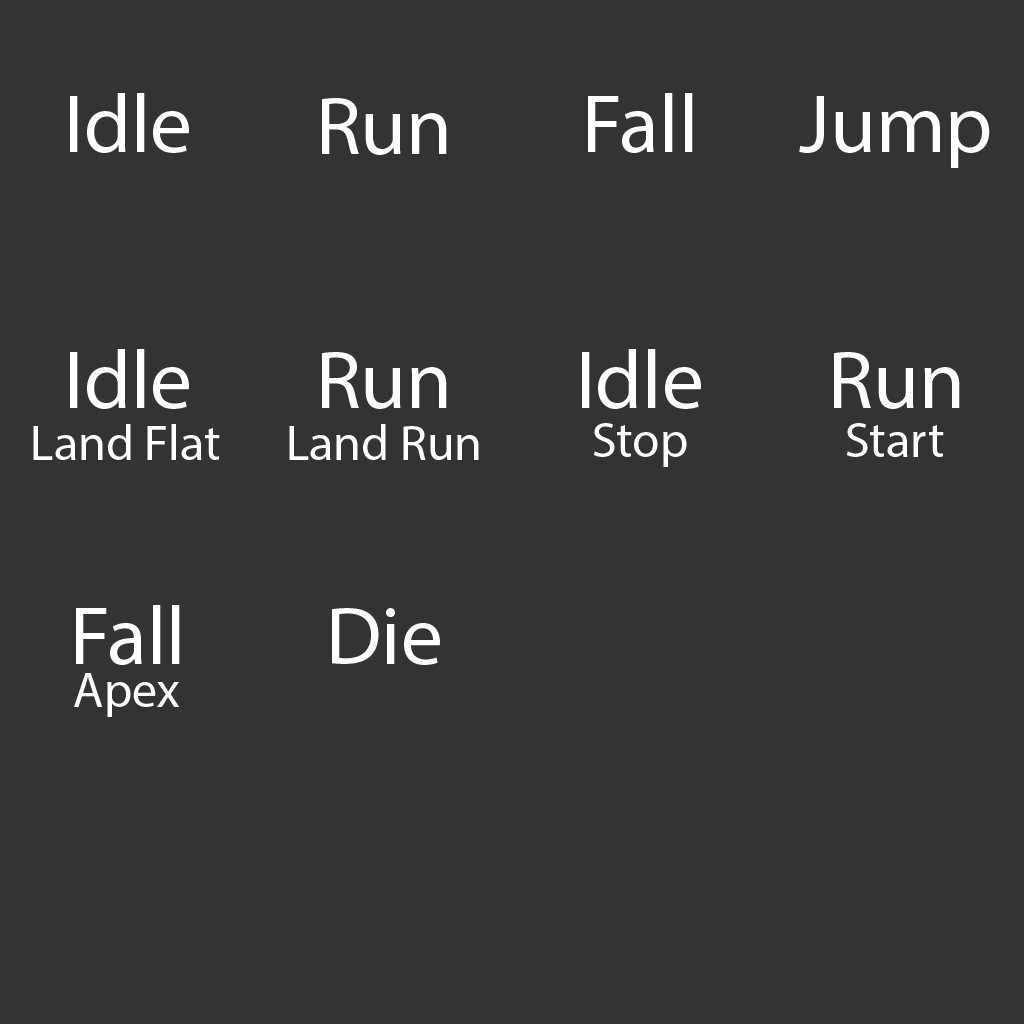
<style>
.page{position:relative;width:1024px;height:1024px;background:#333333}
.page>*{position:absolute;margin:0}
.t1{font:83.3px "MyriadPro-Regular";color:#ffffff}
.t2{font:50px "MyriadPro-Regular";color:#ffffff}
</style>
<div class="page">
<p class="t1" style="left:70px;top:93px;width:119px;height:60px">Idle</p>
<p class="t1" style="left:322px;top:98px;width:125px;height:57px">Run</p>
<p class="t1" style="left:588px;top:93px;width:105px;height:60px">Fall</p>
<p class="t1" style="left:799px;top:96px;width:191px;height:72px">Jump</p>
<p class="t1" style="left:70px;top:349px;width:119px;height:60px">Idle</p>
<p class="t1" style="left:322px;top:352px;width:125px;height:57px">Run</p>
<p class="t1" style="left:582px;top:349px;width:119px;height:60px">Idle</p>
<p class="t1" style="left:834px;top:352px;width:126px;height:57px">Run</p>
<p class="t2" style="left:33px;top:424px;width:187px;height:36px">Land Flat</p>
<p class="t2" style="left:289px;top:424px;width:190px;height:36px">Land Run</p>
<p class="t2" style="left:593px;top:423px;width:94px;height:44px">Stop</p>
<p class="t2" style="left:846px;top:423px;width:98px;height:34px">Start</p>
<p class="t1" style="left:76px;top:605px;width:104px;height:60px">Fall</p>
<p class="t1" style="left:332px;top:608px;width:108px;height:57px">Die</p>
<p class="t2" style="left:74px;top:673px;width:106px;height:44px">Apex</p>
</div>
